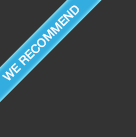
<style>
.page{position:relative;width:136px;height:137px;background:#333333}
.page>*{position:absolute;margin:0}
.t1{font:12px "HelveticaNeueMedium";color:#ffffff}
</style>
<div class="page">
<p class="t1" style="left:2px;top:5px;width:77px;height:76px;rotate:-45deg">WE RECOMMEND</p>
</div>
